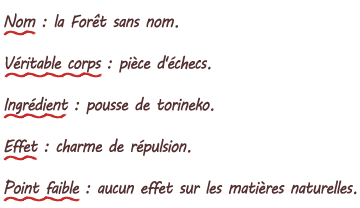
<style>
.page{position:relative;width:360px;height:208px;background:#ffffff}
.page>*{position:absolute;margin:0}
.t1{font:17.3px "MVBoli";letter-spacing:-0.05em;color:#553030;scale:0.9 1}
</style>
<div class="page">
<p class="t1" style="left:4px;top:13px;width:353px;height:182px">Nom : la Forêt sans nom.<br><br>Véritable corps : pièce d'échecs.<br><br>Ingrédient : pousse de torineko.<br><br>Effet : charme de répulsion.<br><br>Point faible : aucun effet sur les matières naturelles.</p>
</div>
